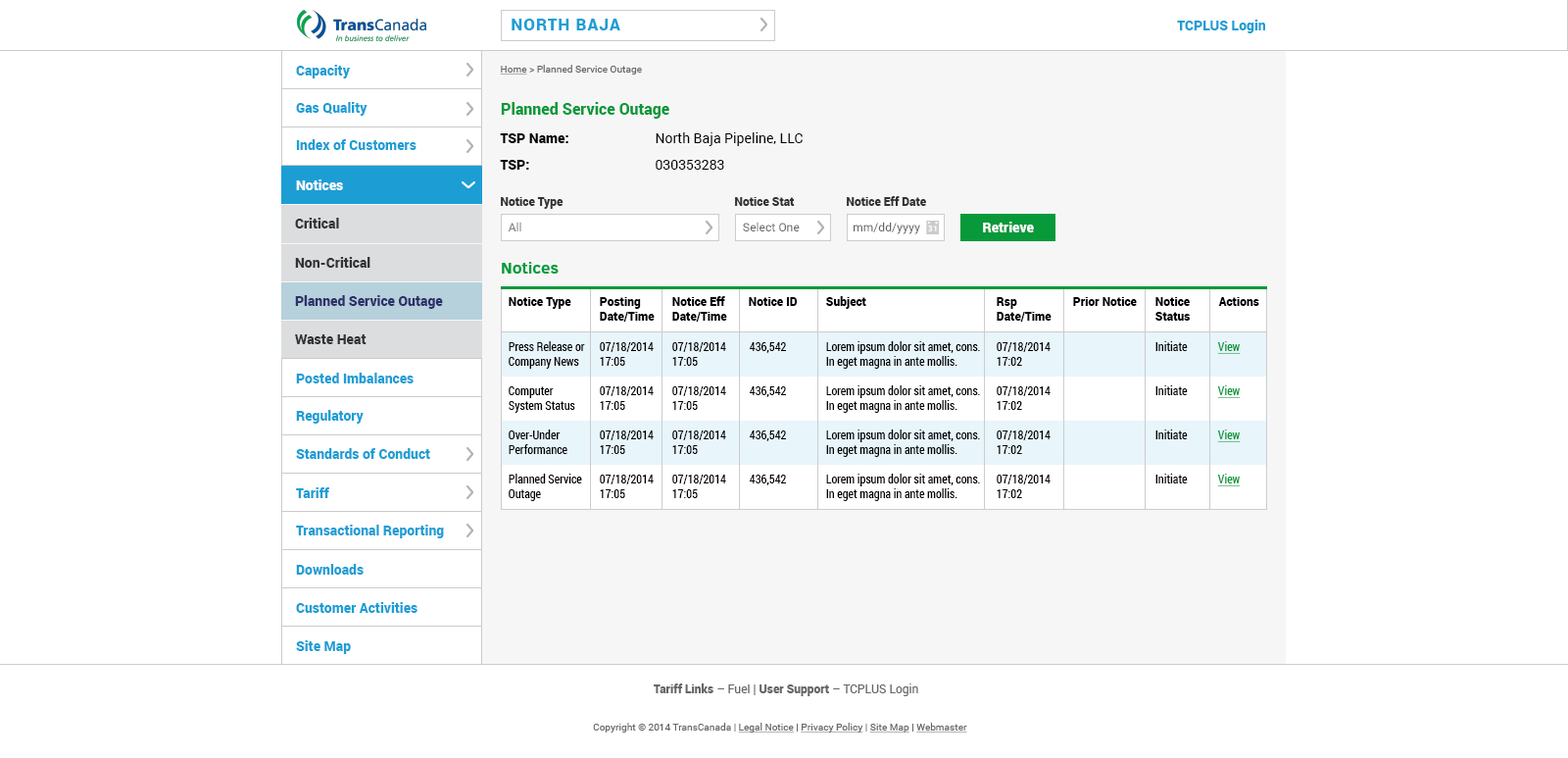
<style>
.page{position:relative;width:1568px;height:758px;background:#ffffff}
.page>*{position:absolute;margin:0}
.t1{font:16.7px "Roboto-Black";letter-spacing:0.06em;color:#1c9ed5}
.t2{font:13.7px "Roboto-Black";color:#1c9ed5}
.t3{font:9.8px "Roboto-Regular";color:#666666}
.t4{font:9.8px "Roboto-Regular";color:#666666;text-decoration:underline}
.t5{font:15.7px "Roboto-Black";color:#07993a}
.t6{font:13.7px/26.5px "Roboto-Black";color:#000000}
.t7{font:13.7px/26.5px "Roboto-Regular";color:#000000}
.t8{font:13.7px "Roboto-Black";color:#ffffff}
.t9{font:11.8px "Roboto-Black";color:#333333}
.t10{font:13.7px "Roboto-Black";color:#333333}
.t11{font:11.8px "Roboto-Regular";color:#666666}
.t12{font:16.7px "ClearSans-Bold";color:#07993a}
.t13{font:13.7px "Roboto-Black";color:#2e3069}
.t14{font:11.8px "Roboto-Black";color:#000000}
.t15{font:11.8px "RobotoCondensed-Regular";color:#000000}
.t16{font:11.8px "RobotoCondensed-Regular";color:#07993a;text-decoration:underline}
.t17{font:11.8px "Roboto-Black";color:#666666}
</style>
<div class="page">
<p class="t1" style="left:512px;top:19px;width:108px;height:11px">NORTH BAJA</p>
<p class="t2" style="left:1177px;top:20px;width:88px;height:13px">TCPLUS Login</p>
<p class="t2" style="left:296px;top:65px;width:54px;height:13px">Capacity</p>
<p class="t3" style="left:500px;top:65px;width:142px;height:9px"><span class="t4">Home</span> &gt; Planned Service Outage</p>
<p class="t2" style="left:296px;top:102px;width:72px;height:14px">Gas Quality</p>
<p class="t5" style="left:501px;top:102px;width:168px;height:17px">Planned Service Outage</p>
<p class="t6" style="left:500px;top:133px;width:68px;height:37px">TSP Name:<br>TSP:</p>
<p class="t7" style="left:656px;top:132px;width:147px;height:38px">North Baja Pipeline, LLC<br>030353283</p>
<p class="t2" style="left:296px;top:139px;width:120px;height:11px">Index of Customers</p>
<p class="t8" style="left:296px;top:179px;width:47px;height:11px">Notices</p>
<p class="t9" style="left:501px;top:197px;width:63px;height:12px">Notice Type</p>
<p class="t9" style="left:735px;top:197px;width:60px;height:9px">Notice Stat</p>
<p class="t9" style="left:847px;top:196px;width:79px;height:10px">Notice Eff Date</p>
<p class="t10" style="left:295px;top:218px;width:44px;height:10px">Critical</p>
<p class="t11" style="left:508px;top:221px;width:13px;height:10px">All</p>
<p class="t11" style="left:743px;top:221px;width:57px;height:10px">Select One</p>
<p class="t11" style="left:854px;top:221px;width:66px;height:13px">mm/dd/yyyy</p>
<p class="t8" style="left:983px;top:221px;width:51px;height:11px">Retrieve</p>
<p class="t10" style="left:295px;top:257px;width:75px;height:11px">Non-Critical</p>
<p class="t12" style="left:502px;top:262px;width:57px;height:11px">Notices</p>
<p class="t13" style="left:295px;top:295px;width:148px;height:14px">Planned Service Outage</p>
<p class="t14" style="left:509px;top:297px;width:62px;height:12px">Notice Type</p>
<p class="t14" style="left:600px;top:297px;width:55px;height:24px">Posting <br>Date/Time</p>
<p class="t14" style="left:672px;top:296px;width:55px;height:25px">Notice Eff<br>Date/Time</p>
<p class="t14" style="left:749px;top:297px;width:49px;height:9px">Notice ID</p>
<p class="t14" style="left:826px;top:296px;width:40px;height:13px">Subject</p>
<p class="t14" style="left:997px;top:297px;width:55px;height:24px">Rsp <br>Date/Time</p>
<p class="t14" style="left:1073px;top:297px;width:64px;height:9px">Prior Notice</p>
<p class="t14" style="left:1155px;top:297px;width:35px;height:23px">Notice<br>Status</p>
<p class="t14" style="left:1218px;top:297px;width:41px;height:9px">Actions</p>
<p class="t10" style="left:295px;top:334px;width:72px;height:10px">Waste Heat</p>
<p class="t15" style="left:509px;top:341px;width:76px;height:27px">Press Release or<br>Company News</p>
<p class="t15" style="left:826px;top:341px;width:154px;height:27px">Lorem ipsum dolor sit amet, cons.<br>In eget magna in ante mollis.</p>
<p class="t15" style="left:1155px;top:341px;width:33px;height:10px">Initiate</p>
<p class="t16" style="left:1217px;top:341px;width:24px;height:13px">View</p>
<p class="t15" style="left:600px;top:342px;width:54px;height:24px">07/18/2014<br>17:05</p>
<p class="t15" style="left:672px;top:342px;width:54px;height:24px">07/18/2014<br>17:05</p>
<p class="t15" style="left:750px;top:342px;width:36px;height:11px">436,542</p>
<p class="t15" style="left:997px;top:342px;width:54px;height:24px">07/18/2014<br>17:02</p>
<p class="t2" style="left:296px;top:372px;width:118px;height:11px">Posted Imbalances</p>
<p class="t15" style="left:509px;top:386px;width:66px;height:27px">Computer<br>System Status</p>
<p class="t15" style="left:600px;top:386px;width:54px;height:24px">07/18/2014<br>17:05</p>
<p class="t15" style="left:672px;top:386px;width:54px;height:24px">07/18/2014<br>17:05</p>
<p class="t15" style="left:750px;top:386px;width:36px;height:11px">436,542</p>
<p class="t15" style="left:826px;top:385px;width:154px;height:28px">Lorem ipsum dolor sit amet, cons.<br>In eget magna in ante mollis.</p>
<p class="t15" style="left:997px;top:386px;width:54px;height:24px">07/18/2014<br>17:02</p>
<p class="t15" style="left:1155px;top:385px;width:33px;height:10px">Initiate</p>
<p class="t16" style="left:1217px;top:385px;width:24px;height:13px">View</p>
<p class="t2" style="left:296px;top:410px;width:68px;height:13px">Regulatory</p>
<p class="t15" style="left:509px;top:429px;width:58px;height:25px">Over-Under<br>Performance</p>
<p class="t15" style="left:600px;top:430px;width:54px;height:24px">07/18/2014<br>17:05</p>
<p class="t15" style="left:672px;top:430px;width:54px;height:24px">07/18/2014<br>17:05</p>
<p class="t15" style="left:750px;top:430px;width:36px;height:11px">436,542</p>
<p class="t15" style="left:826px;top:429px;width:154px;height:28px">Lorem ipsum dolor sit amet, cons.<br>In eget magna in ante mollis.</p>
<p class="t15" style="left:997px;top:430px;width:54px;height:24px">07/18/2014<br>17:02</p>
<p class="t15" style="left:1155px;top:429px;width:33px;height:10px">Initiate</p>
<p class="t16" style="left:1217px;top:429px;width:24px;height:13px">View</p>
<p class="t2" style="left:296px;top:448px;width:134px;height:11px">Standards of Conduct</p>
<p class="t15" style="left:509px;top:473px;width:73px;height:28px">Planned Service<br>Outage</p>
<p class="t15" style="left:826px;top:473px;width:154px;height:28px">Lorem ipsum dolor sit amet, cons.<br>In eget magna in ante mollis.</p>
<p class="t15" style="left:1155px;top:473px;width:33px;height:10px">Initiate</p>
<p class="t16" style="left:1217px;top:473px;width:24px;height:13px">View</p>
<p class="t15" style="left:600px;top:474px;width:54px;height:24px">07/18/2014<br>17:05</p>
<p class="t15" style="left:672px;top:474px;width:54px;height:24px">07/18/2014<br>17:05</p>
<p class="t15" style="left:750px;top:474px;width:36px;height:11px">436,542</p>
<p class="t15" style="left:997px;top:474px;width:54px;height:24px">07/18/2014<br>17:02</p>
<p class="t2" style="left:296px;top:487px;width:33px;height:11px">Tariff</p>
<p class="t2" style="left:296px;top:524px;width:148px;height:14px">Transactional Reporting</p>
<p class="t2" style="left:296px;top:564px;width:68px;height:10px">Downloads</p>
<p class="t2" style="left:296px;top:602px;width:121px;height:10px">Customer Activities</p>
<p class="t2" style="left:296px;top:640px;width:55px;height:14px">Site Map</p>
<p class="t17" style="left:654px;top:683px;width:264px;height:13px">Tariff Links<span class="t11"> – </span><span class="t11">Fuel | </span>User Support<span class="t11"> – </span><span class="t11">TCPLUS Login</span></p>
<p class="t3" style="left:593px;top:722px;width:374px;height:10px">Copyright © 2014 TransCanada | <span class="t4">Legal Notice</span> | <span class="t4">Privacy Policy</span> | <span class="t4">Site Map</span> | <span class="t4">Webmaster</span></p>
</div>
